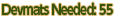
<style>
.page{position:relative;width:115px;height:18px;background:#ffffff}
.page>*{position:absolute;margin:0}
.t1{font:14px "UDShinGoPro-Bold";letter-spacing:-0.08em;color:#375309;scale:0.85 1}
</style>
<div class="page">
<p class="t1" style="left:2px;top:2px;width:111px;height:13px">Devmats Needed: 55</p>
</div>
